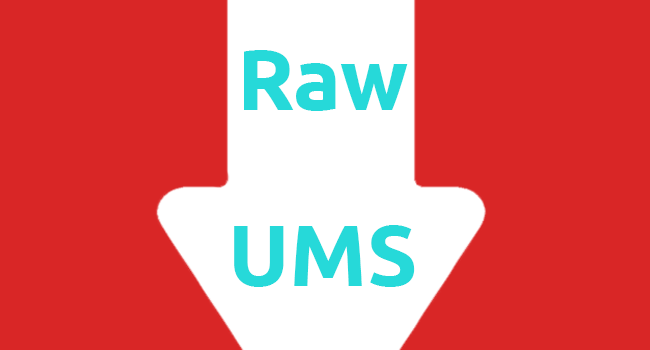
<style>
.page{position:relative;width:650px;height:350px;background:#d92626}
.page>*{position:absolute;margin:0}
.t1{font:87px "Ubuntu-Bold";color:#26d9d9}
</style>
<div class="page">
<p class="t1" style="left:234px;top:50px;width:181px;height:237px;text-align:center">Raw<br><br>UMS</p>
</div>
